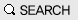
<style>
.page{position:relative;width:78px;height:20px;background:#e8e8e8}
.page>*{position:absolute;margin:0}
.t1{font:13px "YDIYGO330";color:#000000}
</style>
<div class="page">
<p class="t1" style="left:20px;top:5px;width:50px;height:10px">SEARCH</p>
</div>
